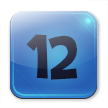
<style>
.page{position:relative;width:108px;height:108px;background:#ffffff}
.page>*{position:absolute;margin:0}
.t1{font:74.2px "Brady-Bunch"}
</style>
<div class="page">
<p class="t1" style="left:26px;top:34px;width:51px;height:46px">12</p>
</div>
